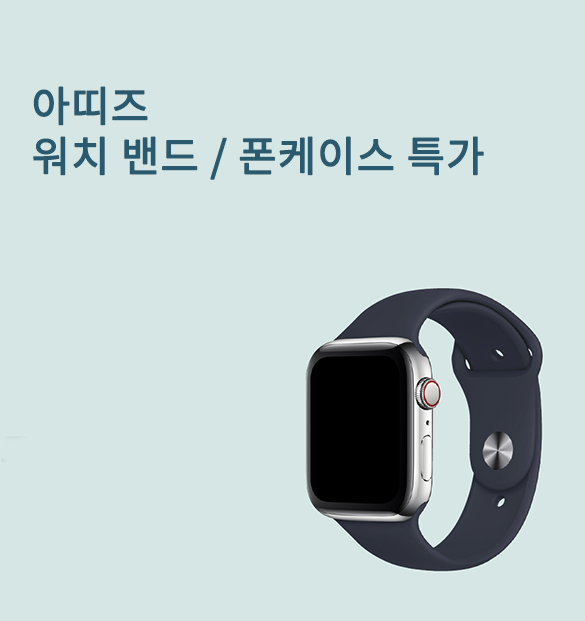
<style>
.page{position:relative;width:585px;height:621px;background:#d5e6e4}
.page>*{position:absolute;margin:0}
.t1{font:41.7px/50px "NotoSansKR-Regular";color:#2a5a6f;font-weight:bold}
</style>
<div class="page">
<p class="t1" style="left:33px;top:86px;width:451px;height:94px">아띠즈<br>워치 밴드 / 폰케이스 특가</p>
</div>
